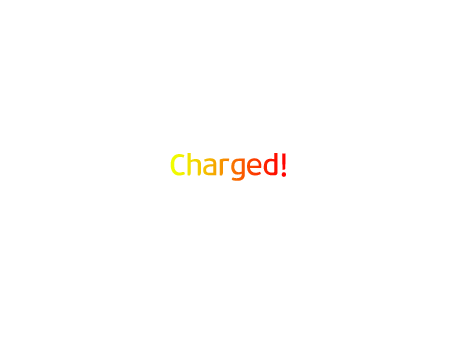
<style>
.page{position:relative;width:454px;height:340px;background:#ffffff}
.page>*{position:absolute;margin:0}
.t1{font:30px "12LotteMartDreamBold"}
</style>
<div class="page">
<p class="t1" style="left:170px;top:153px;width:116px;height:28px">Charged!</p>
</div>
